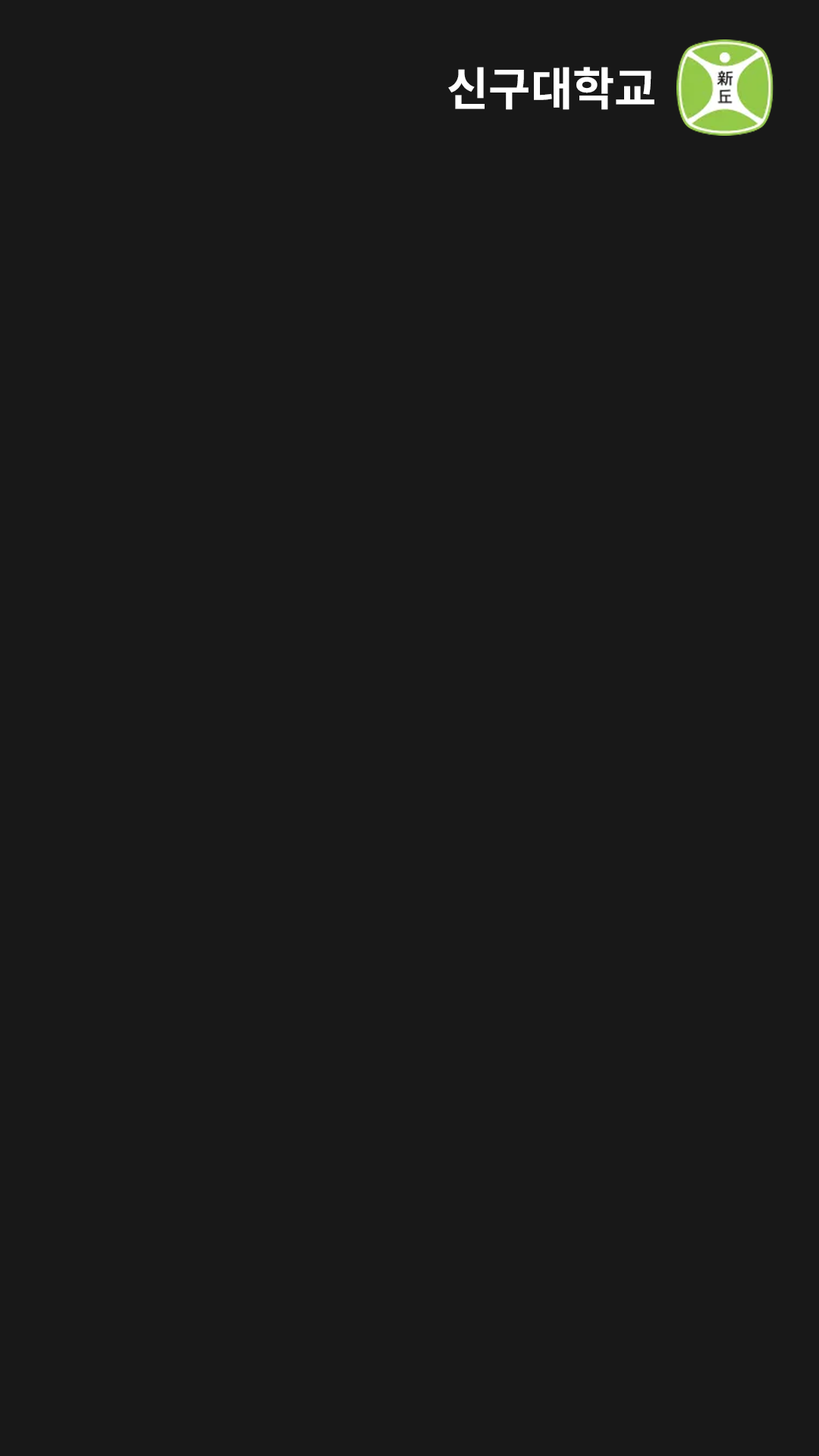
<style>
.page{position:relative;width:819px;height:1456px;background:#181818}
.page>*{position:absolute;margin:0}
.t1{font:45.5px "NotoSansKR-Bold";color:#ffffff}
</style>
<div class="page">
<p class="t1" style="left:448px;top:67px;width:206px;height:43px">신구대학교</p>
</div>
